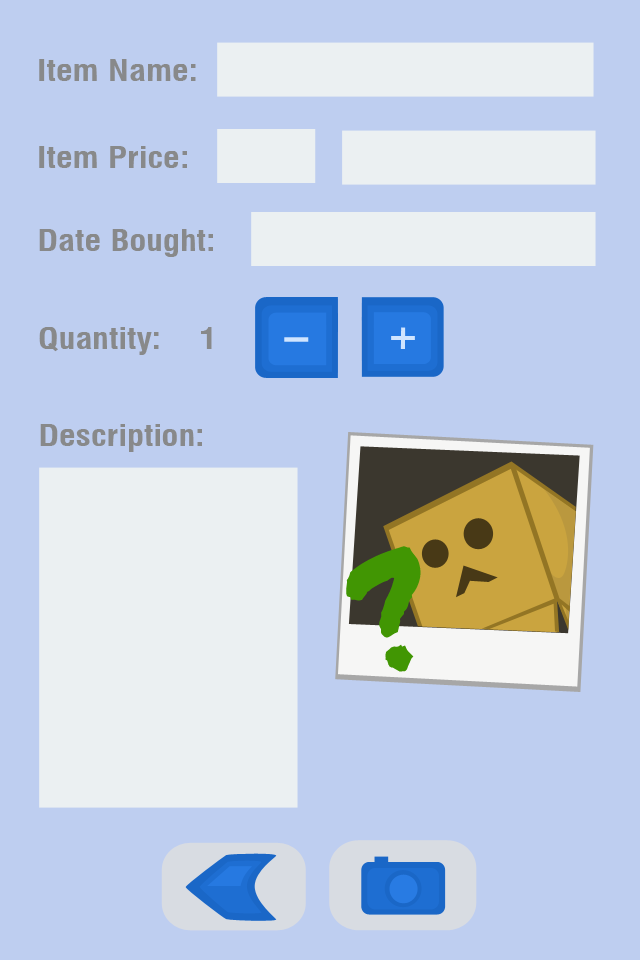
<style>
.page{position:relative;width:640px;height:960px;background:#becef0}
.page>*{position:absolute;margin:0}
.t1{font:29.5px "MilfordBold";color:#88898a}
</style>
<div class="page">
<p class="t1" style="left:39px;top:59px;width:157px;height:22px">Item Name:</p>
<p class="t1" style="left:39px;top:146px;width:148px;height:22px">Item Price:</p>
<p class="t1" style="left:39px;top:229px;width:174px;height:28px">Date Bought:</p>
<p class="t1" style="left:39px;top:327px;width:173px;height:28px">Quantity:    1</p>
<p class="t1" style="left:40px;top:424px;width:162px;height:28px">Description:</p>
</div>
